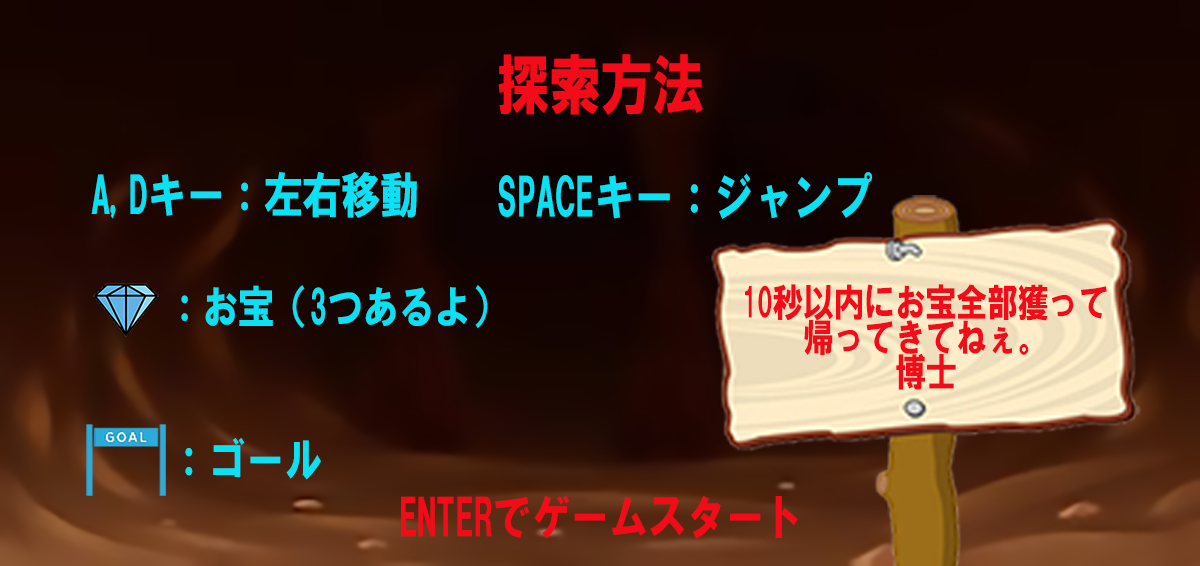
<style>
.page{position:relative;width:1200px;height:566px}
.page>*{position:absolute;margin:0}
.t1{font:66.2px "HGSoeiKakugothicUB";letter-spacing:-0.025em;color:#f40b19;font-variant:small-caps;scale:0.8 1}
.t2{font:49.5px "HGSoeiKakugothicUB";letter-spacing:-0.025em;color:#0be1f4;font-variant:small-caps;scale:0.8 1}
.t3{font:51px "HGSoeiKakugothicUB";letter-spacing:-0.025em;color:#0be1f4;font-variant:small-caps;scale:0.8 1}
.t4{font:45.8px "HGSoeiKakugothicUB";letter-spacing:-0.025em;color:#0be1f4;font-variant:small-caps;scale:0.8 1}
.t5{font:39.3px/34.9px "HGSoeiKakugothicUB";letter-spacing:-0.025em;color:#f40b19;font-variant:small-caps;scale:0.8 1}
.t6{font:48.9px "HGSoeiKakugothicUB";letter-spacing:-0.025em;color:#0be1f4;font-variant:small-caps;scale:0.8 1}
.t7{font:49.6px "HGSoeiKakugothicUB";letter-spacing:-0.025em;color:#f40b19;font-variant:small-caps;scale:0.8 1}
</style>
<div class="page">
<p class="t1" style="left:498px;top:54px;width:205px;height:61px">探索方法</p>
<p class="t2" style="left:91px;top:172px;width:326px;height:47px">A,Dキー：左右移動</p>
<p class="t3" style="left:498px;top:172px;width:374px;height:47px">SPACEキー：ジャンプ</p>
<p class="t4" style="left:181px;top:285px;width:307px;height:43px">：お宝（3つあるよ）</p>
<p class="t5" style="left:745px;top:284px;width:362px;height:106px;text-align:center">10秒以内にお宝全部獲って<br>帰ってきてねぇ。<br>博士</p>
<p class="t6" style="left:185px;top:438px;width:136px;height:42px">：ゴール</p>
<p class="t7" style="left:401px;top:495px;width:397px;height:44px">ENTERでゲームスタート</p>
</div>
